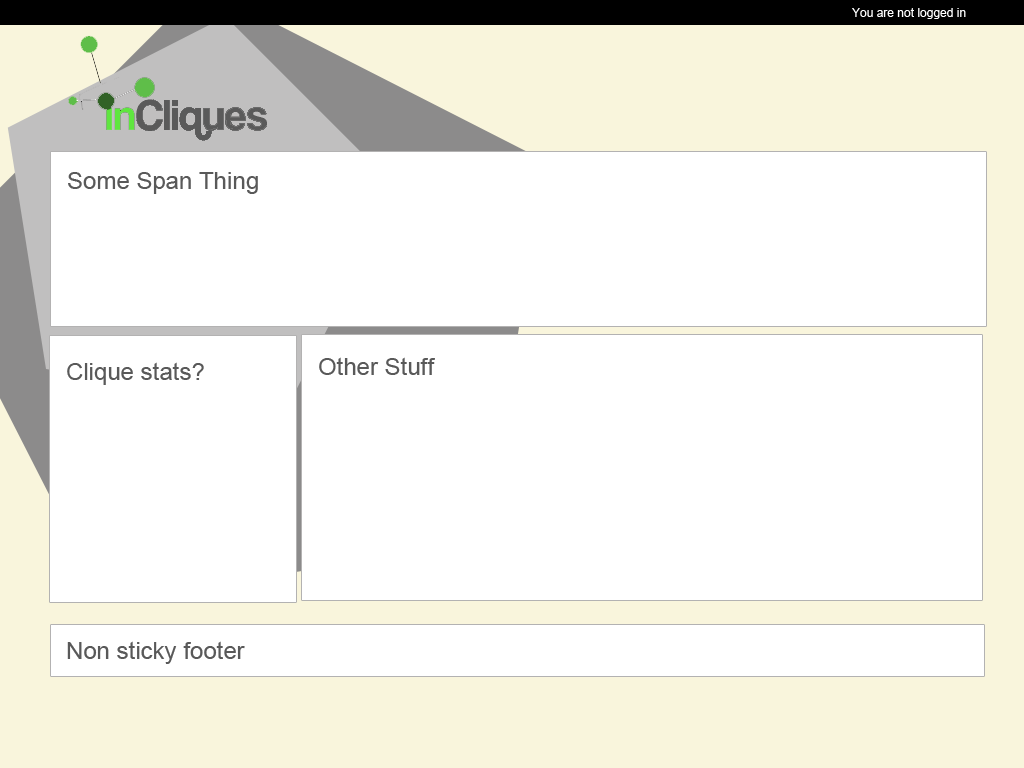
<style>
.page{position:relative;width:1024px;height:768px;background:#ffffff}
.page>*{position:absolute;margin:0}
.t1{font:12px "ArialMT";color:#ffffff}
.t2{font:24px "ArialMT";color:#595959}
</style>
<div class="page">
<p class="t1" style="left:852px;top:8px;width:114px;height:11px">You are not logged in</p>
<p class="t2" style="left:68px;top:172px;width:190px;height:22px">Some Span Thing</p>
<p class="t2" style="left:67px;top:362px;width:137px;height:23px">Clique stats?</p>
<p class="t2" style="left:319px;top:357px;width:116px;height:18px">Other Stuff</p>
<p class="t2" style="left:67px;top:641px;width:178px;height:23px">Non sticky footer</p>
</div>
